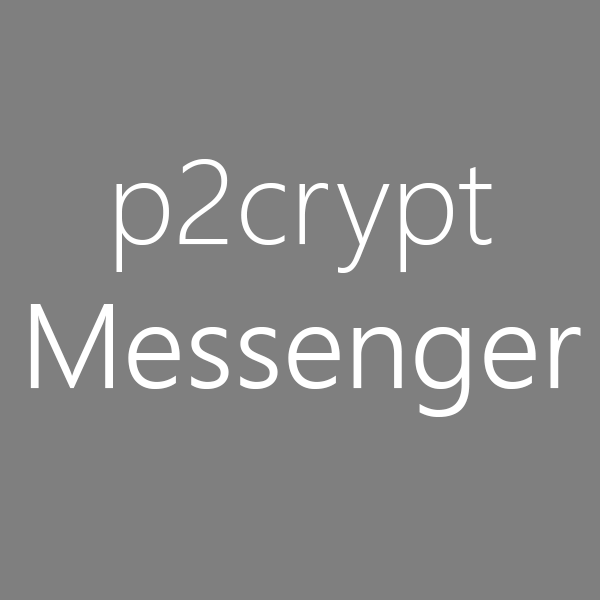
<style>
.page{position:relative;width:600px;height:600px;background:#7f7f7f}
.page>*{position:absolute;margin:0}
.t1{font:120px "SegoeUI-Semilight";color:#ffffff}
.t2{font:120px "SegoeUI-Light";color:#ffffff}
</style>
<div class="page">
<p class="t1" style="left:30px;top:159px;width:551px;height:258px;text-align:center"><span class="t2">p2crypt <br></span>Messenger</p>
</div>
